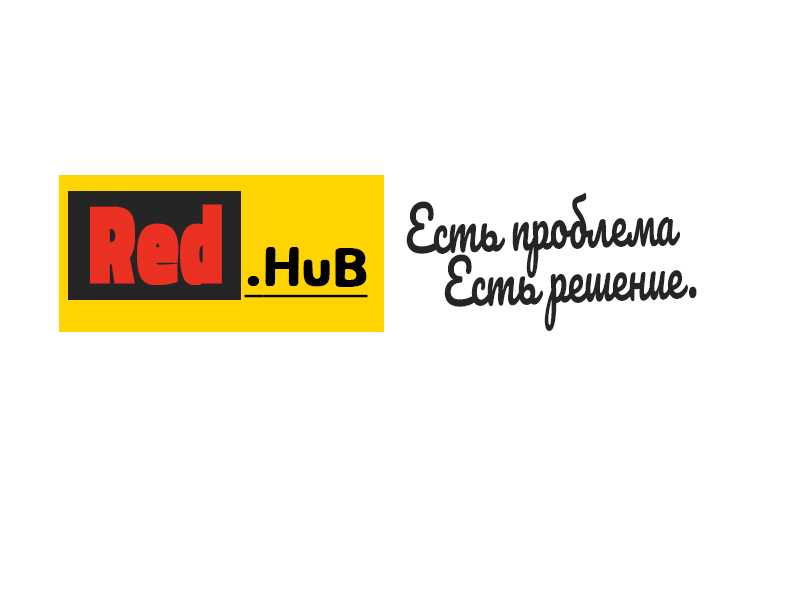
<style>
.page{position:relative;width:800px;height:600px;background:#ffffff}
.page>*{position:absolute;margin:0}
.t1{font:61.2px/54px "Pacifico-Regular";color:#252525;scale:0.67 1}
.t2{font:112.2px "TitilliumWeb-Black";color:#eb3122;font-weight:bold;scale:0.67 1}
.t3{font:52.8px "Jua-Regular";color:#000001;font-weight:bold;text-decoration:underline;scale:1.14 1}
.t4{font:52.8px "Gugi-Regular";color:#000001;font-weight:bold;text-decoration:underline;scale:1.14 1}
</style>
<div class="page">
<p class="t1" style="left:406px;top:192px;width:291px;height:139px;text-align:right;rotate:-2deg">Есть проблема<br> Есть решение.</p>
<p class="t2" style="left:90px;top:204px;width:132px;height:81px">Red</p>
<p class="t3" style="left:244px;top:247px;width:124px;height:51px"><span class="t4">.</span>HuB</p>
</div>
